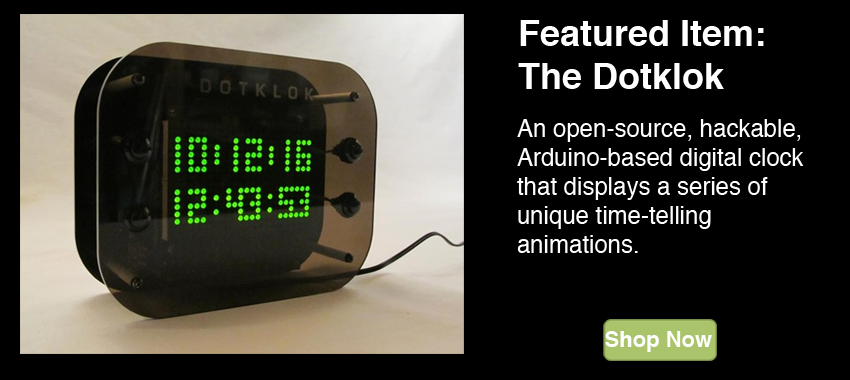
<style>
.page{position:relative;width:850px;height:380px;background:#000000}
.page>*{position:absolute;margin:0}
.t1{font:36px "Helvetica-Bold";color:#fefefe}
.t2{font:24px "Helvetica";color:#fefefe}
.t3{font:22px "Helvetica-Bold";color:#fefefe}
</style>
<div class="page">
<p class="t1" style="left:518px;top:20px;width:246px;height:69px">Featured Item:<br>The Dotklok</p>
<p class="t2" style="left:517px;top:119px;width:287px;height:134px">An open-source, hackable, <br>Arduino-based digital clock <br>that displays a series of <br>unique time-telling <br>animations.</p>
<p class="t3" style="left:605px;top:331px;width:107px;height:21px">Shop Now</p>
</div>
